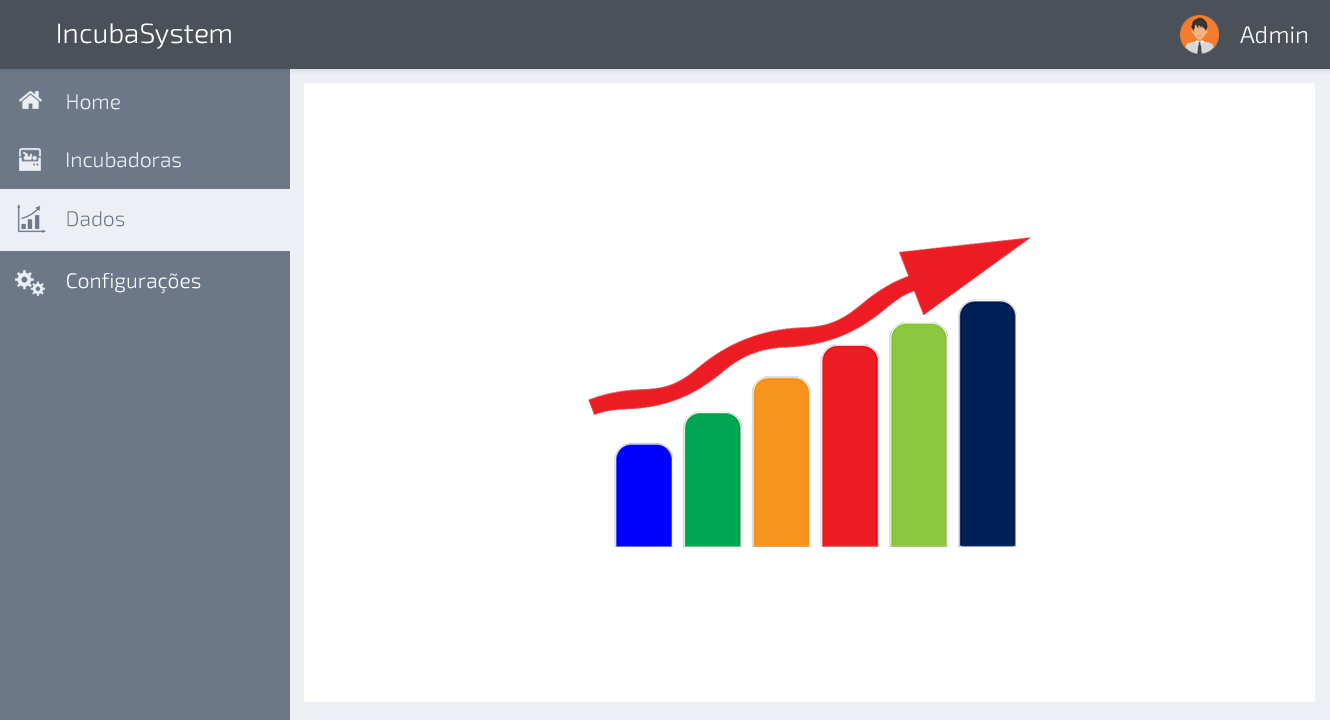
<style>
.page{position:relative;width:1330px;height:720px;background:#ffffff}
.page>*{position:absolute;margin:0}
.t1{font:28px "Exo2-Light";color:#ffffff}
.t2{font:24px "Exo2-Light";color:#ffffff}
.t3{font:21px "Exo2-Light";color:#ecf0f5}
.t4{font:21px "Exo2-Light";color:#6c7888}
.t5{font:21px "Exo2-Light";color:#ffffff}
</style>
<div class="page">
<p class="t1" style="left:58px;top:23px;width:173px;height:26px">IncubaSystem</p>
<p class="t2" style="left:1240px;top:26px;width:67px;height:18px">Admin</p>
<p class="t3" style="left:67px;top:94px;width:53px;height:16px">Home</p>
<p class="t3" style="left:67px;top:152px;width:114px;height:16px">Incubadoras</p>
<p class="t4" style="left:67px;top:211px;width:58px;height:16px">Dados</p>
<p class="t5" style="left:67px;top:273px;width:134px;height:21px">Configurações</p>
</div>
